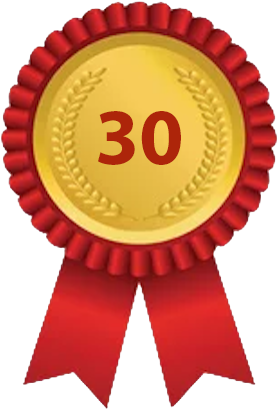
<style>
.page{position:relative;width:278px;height:411px;background:#ffffff}
.page>*{position:absolute;margin:0}
.t1{font:80px "MyriadPro-Bold";color:#ad250a}
</style>
<div class="page">
<p class="t1" style="left:98px;top:111px;width:83px;height:54px">30</p>
</div>
